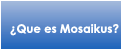
<style>
.page{position:relative;width:127px;height:50px}
.page>*{position:absolute;margin:0}
.t1{font:11.7px "CenturyGothic-Bold";color:#ffffff}
</style>
<div class="page">
<p class="t1" style="left:10px;top:24px;width:109px;height:12px">¿Que es Mosaikus?</p>
</div>
